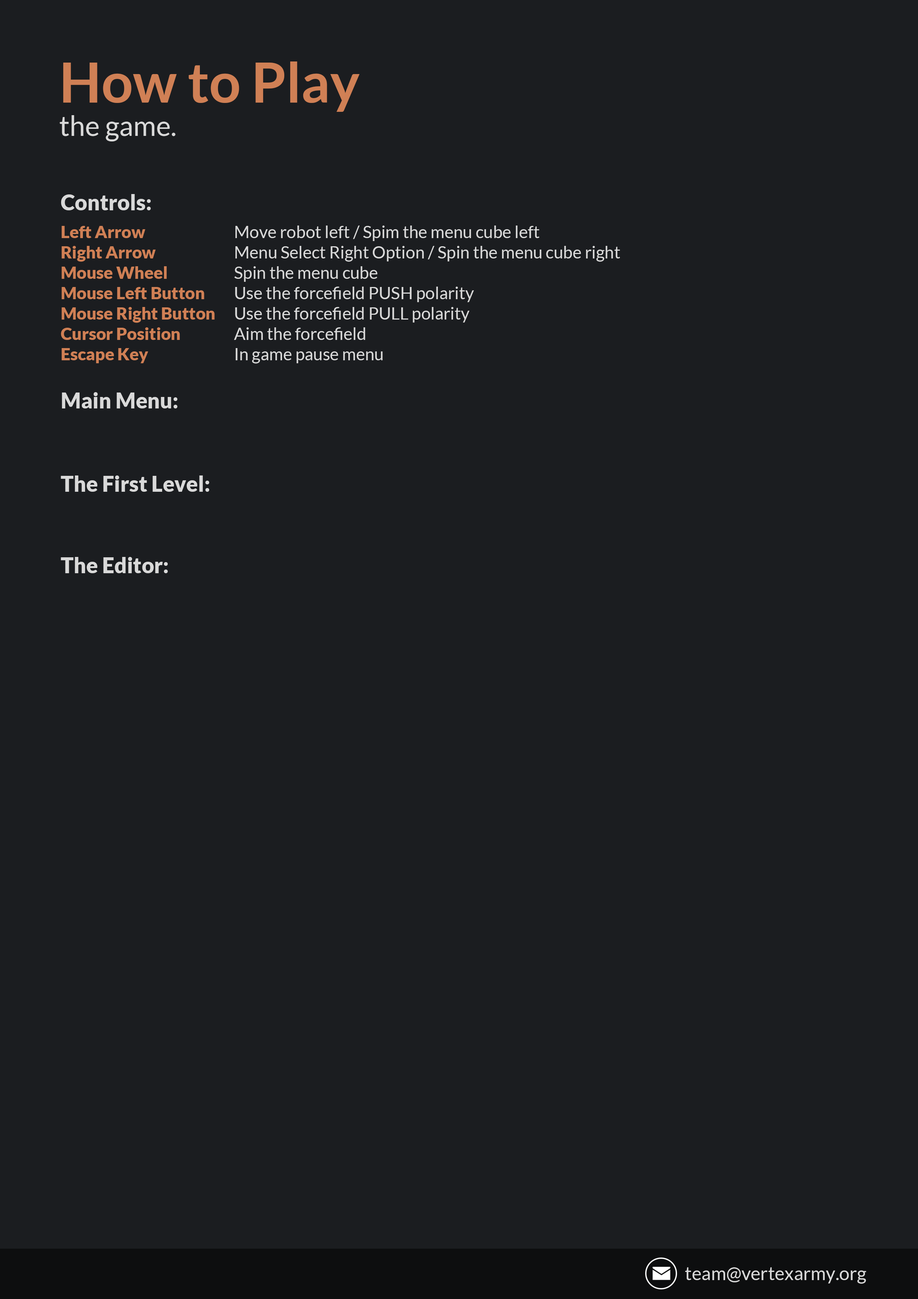
<style>
.page{position:relative;width:918px;height:1299px;background:#1b1d20}
.page>*{position:absolute;margin:0}
.t1{font:55.5px "Lato-Bold";color:#d08055}
.t2{font:27.8px "Lato-Regular";color:#d9d9d9}
.t3{font:17px "Lato-Regular";color:#d9d9d9}
.t4{font:21.6px/27.8px "Lato-Black";color:#d9d9d9}
.t5{font:17px/27.8px "Lato-Black";color:#d08055}
.t6{font:17px "Lato-Black";color:#d08055}
.t7{font:21.6px "Lato-Black";color:#d9d9d9}
.t8{font:18.5px "Lato-Regular";color:#d9d9d9}
</style>
<div class="page">
<p class="t1" style="left:60px;top:61px;width:300px;height:80px">How to Play<br><span class="t2">the game.</span></p>
<p class="t3" style="left:61px;top:194px;width:559px;height:379px;text-align:justify"><span class="t4">Controls:<br></span><span class="t5">Left Arrow         </span>Move robot left / Spim the menu cube left<br><span class="t6">Right Arrow      </span>Menu Select Right Option / Spin the menu cube right<br><span class="t6">Mouse Wheel</span>     Spin the menu cube<br><span class="t6">Mouse Left Button   </span>Use the forcefield PUSH polarity<br><span class="t6">Mouse Right Button   </span>Use the forcefield PULL polarity<br><span class="t6">Cursor Position     </span>Aim the forcefield<br><span class="t6">Escape Key</span>       In game pause menu<br><br><span class="t7">Main </span><span class="t4">Menu:<br><br><br></span><span class="t7">T</span><span class="t4">he First Level:<br><br><br></span><span class="t7">The Editor:</span></p>
<p class="t8" style="left:685px;top:1267px;width:181px;height:17px">team@vertexarmy.org</p>
</div>
